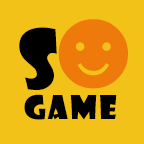
<style>
.page{position:relative;width:144px;height:144px;background:#f3c219}
.page>*{position:absolute;margin:0}
.t1{font:80px "ShowcardGothic-Reg";letter-spacing:0.075em;color:#000000}
.t2{font:110.9px "STXihei";letter-spacing:0.075em;color:#ed7a0a}
.t3{font:32px "ShowcardGothic-Reg";letter-spacing:0.075em;color:#000000}
</style>
<div class="page">
<p class="t1" style="left:19px;top:27px;width:38px;height:63px">S</p>
<p class="t2" style="left:58px;top:19px;width:70px;height:70px">☻</p>
<p class="t3" style="left:24px;top:94px;width:93px;height:26px">Game</p>
</div>
